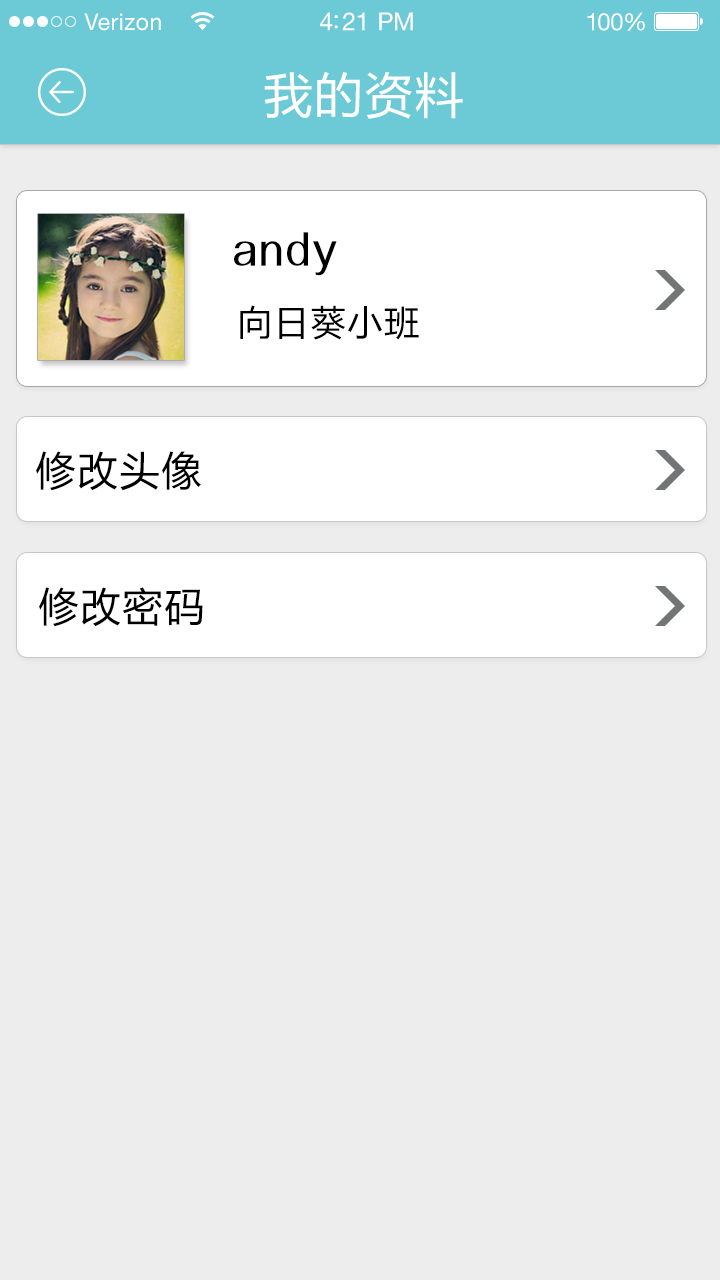
<style>
.page{position:relative;width:720px;height:1280px;background:#ededed}
.page>*{position:absolute;margin:0}
.t1{font:23px "HelveticaNeueLTStd-Roman";letter-spacing:0.02em;color:#ffffff}
.t2{font:25px "HelveticaNeueLTStd-Roman";letter-spacing:-0.02em;color:#ffffff}
.t3{font:24px "HelveticaNeueLTStd-Roman";letter-spacing:-0.02em;color:#ffffff}
.t4{font:48px "MicrosoftYaHei";letter-spacing:0.05em;color:#ffffff}
.t5{font:48px "Alido";letter-spacing:0.05em;color:#000000}
.t6{font:35px "MicrosoftYaHei";letter-spacing:0.05em;color:#000000}
.t7{font:40px "MicrosoftYaHei";letter-spacing:0.05em;color:#000000}
</style>
<div class="page">
<p class="t1" style="left:84px;top:13px;width:77px;height:18px">Verizon</p>
<p class="t2" style="left:320px;top:12px;width:93px;height:19px">4:21 PM</p>
<p class="t3" style="left:587px;top:12px;width:58px;height:19px">100%</p>
<p class="t4" style="left:264px;top:71px;width:199px;height:48px">我的资料</p>
<p class="t5" style="left:234px;top:232px;width:103px;height:44px">andy</p>
<p class="t6" style="left:240px;top:305px;width:179px;height:35px">向日葵小班</p>
<p class="t7" style="left:36px;top:451px;width:165px;height:40px">修改头像</p>
<p class="t7" style="left:39px;top:587px;width:164px;height:40px">修改密码</p>
</div>
